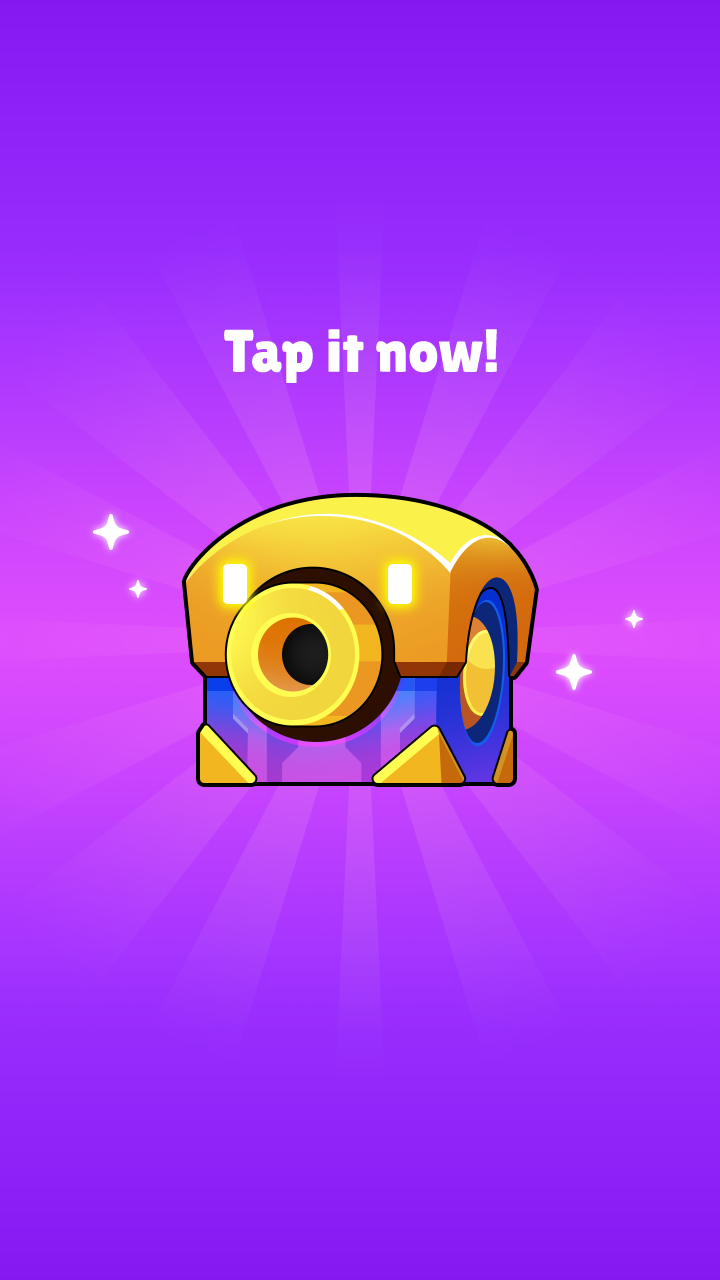
<style>
.page{position:relative;width:720px;height:1280px}
.page>*{position:absolute;margin:0}
.t1{font:60px "LilitaOne";color:#ffffff}
</style>
<div class="page">
<p class="t1" style="left:224px;top:329px;width:273px;height:54px">Tap it now!</p>
</div>
